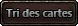
<style>
.page{position:relative;width:78px;height:26px}
.page>*{position:absolute;margin:0}
.t1{font:10.7px "LaoUI-Bold"}
</style>
<div class="page">
<p class="t1" style="left:6px;top:9px;width:67px;height:8px">Tri des cartes</p>
</div>
